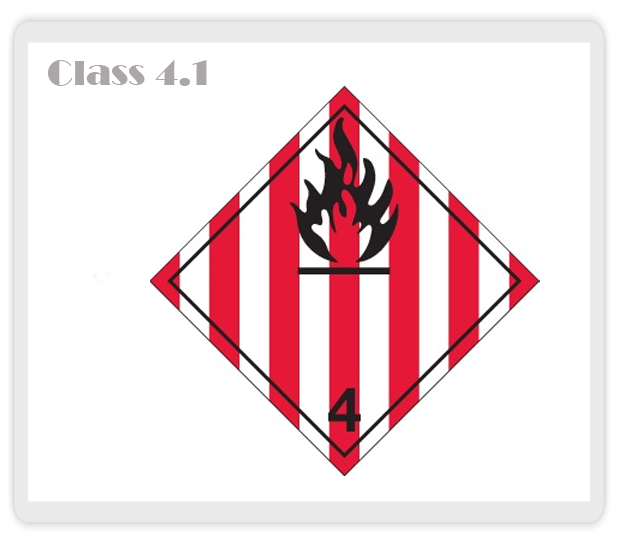
<style>
.page{position:relative;width:618px;height:544px;background:#ffffff}
.page>*{position:absolute;margin:0}
.t1{font:36px "Broadway";color:#aca7a7}
</style>
<div class="page">
<p class="t1" style="left:48px;top:59px;width:159px;height:27px">Class 4.1</p>
</div>
